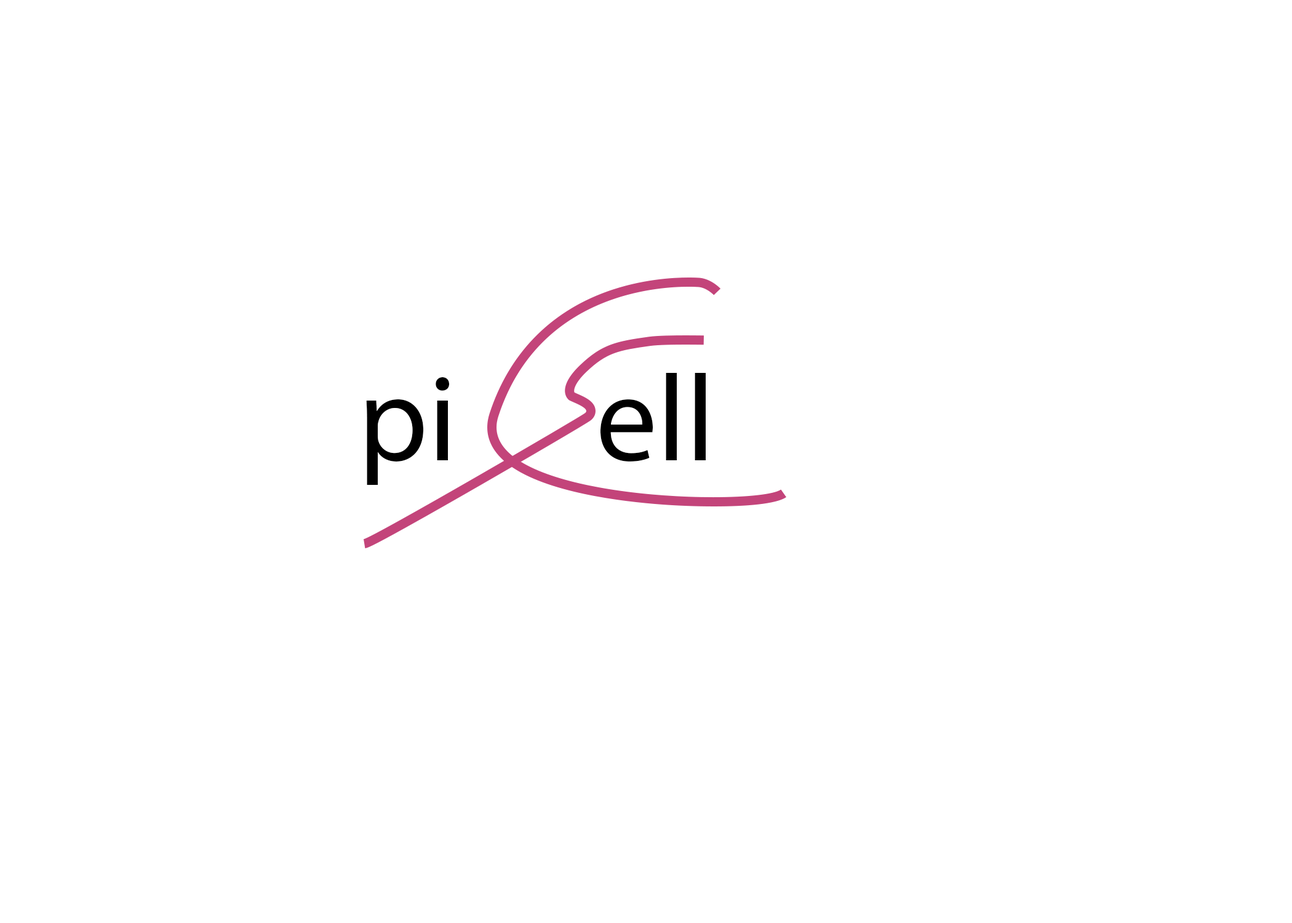
<style>
.page{position:relative;width:1292px;height:923px;background:#ffffff}
.page>*{position:absolute;margin:0}
.t1{font:123.1px "MyriadPro-Regular";color:#000000}
</style>
<div class="page">
<p class="t1" style="left:366px;top:377px;width:83px;height:108px">pi</p>
<p class="t1" style="left:600px;top:373px;width:106px;height:88px">ell</p>
</div>
